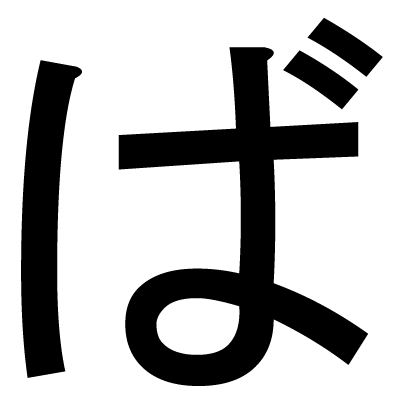
<style>
.page{position:relative;width:400px;height:400px;background:#ffffff}
.page>*{position:absolute;margin:0}
.t1{font:416.7px "MS-PGothic";color:#000000}
</style>
<div class="page">
<p class="t1" style="left:21px;top:17px;width:362px;height:369px">ば</p>
</div>
